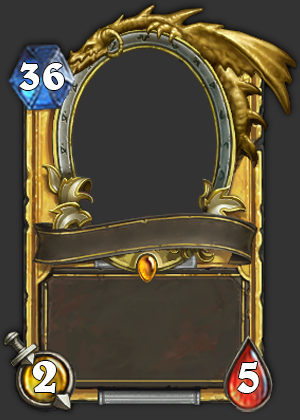
<style>
.page{position:relative;width:300px;height:420px;background:#333333}
.page>*{position:absolute;margin:0}
.t1{font:44px "BelweBT-Bold";color:#ffffff}
.t2{font:50.7px "BelweBT-Bold";color:#ffffff}
</style>
<div class="page">
<p class="t1" style="left:19px;top:62px;width:45px;height:28px">36</p>
<p class="t2" style="left:32px;top:361px;width:24px;height:32px">2</p>
<p class="t2" style="left:237px;top:362px;width:22px;height:31px">5</p>
</div>
